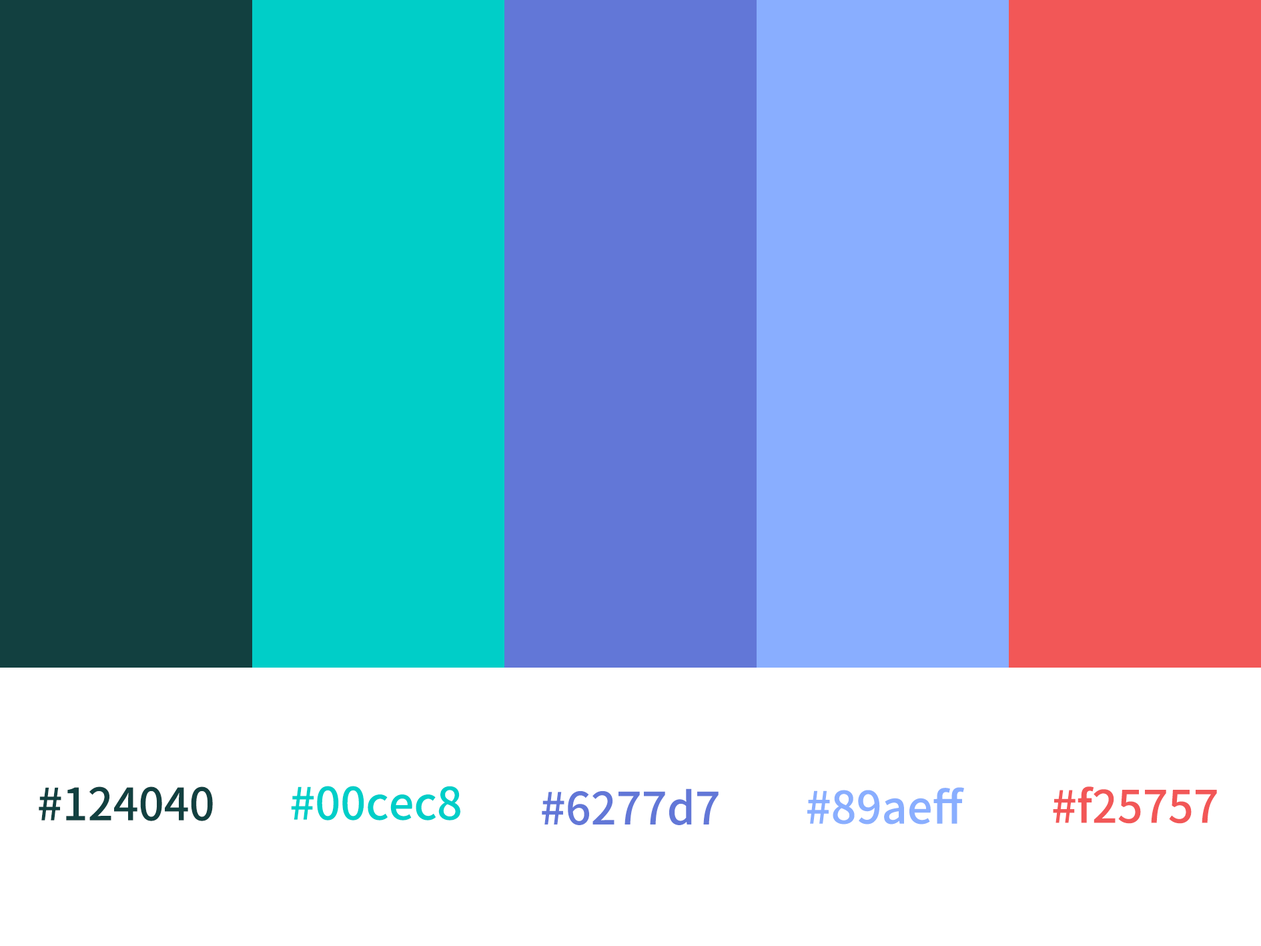
<style>
.page{position:relative;width:1261px;height:946px;background:#ffffff}
.page>*{position:absolute;margin:0}
.t1{font:44.5px "NotoSansKR-Medium";color:#00cec8}
.t2{font:44.5px "NotoSansKR-Medium";color:#124040}
.t3{font:44.5px "NotoSansKR-Medium";color:#6277d7}
.t4{font:44.5px "NotoSansKR-Medium";color:#89aeff}
.t5{font:44.5px "NotoSansKR-Medium";color:#f25757}
</style>
<div class="page">
<p class="t1" style="left:291px;top:785px;width:169px;height:35px">#00cec8</p>
<p class="t2" style="left:39px;top:786px;width:174px;height:35px">#124040</p>
<p class="t3" style="left:542px;top:788px;width:177px;height:37px">#6277d7</p>
<p class="t4" style="left:807px;top:787px;width:157px;height:37px">#89aeff</p>
<p class="t5" style="left:1053px;top:786px;width:164px;height:37px">#f25757</p>
</div>
